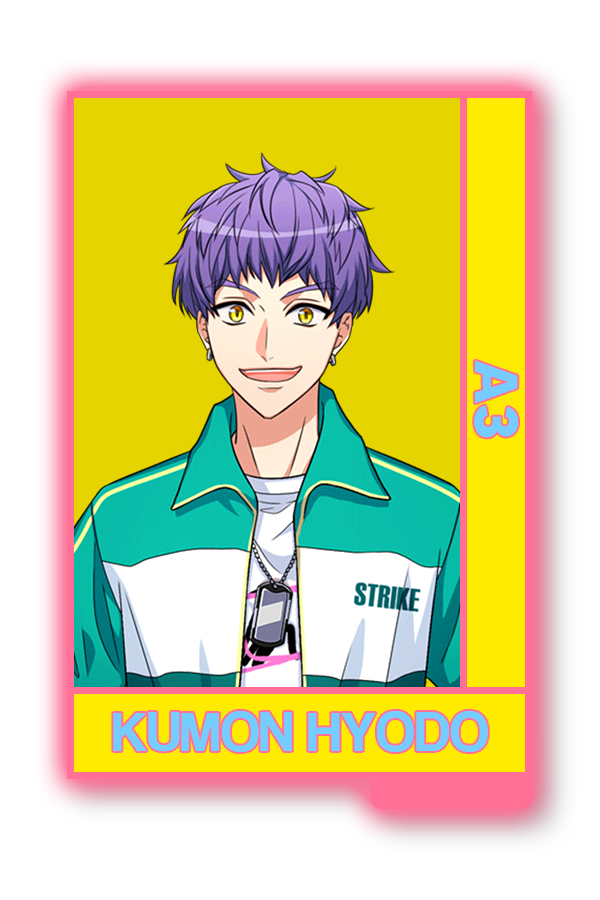
<style>
.page{position:relative;width:600px;height:900px;background:#ffffff}
.page>*{position:absolute;margin:0}
.t1{font:60.5px "MADETOMMY-Bold";color:#74ccff}
.t2{font:57.7px "CoolveticaRg-Regular";color:#74ccff}
</style>
<div class="page">
<p class="t1" style="left:474px;top:360px;width:44px;height:78px;rotate:90deg">A3</p>
<p class="t2" style="left:113px;top:711px;width:375px;height:41px">KUMON HYODO</p>
</div>
